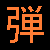
<style>
.page{position:relative;width:50px;height:50px;background:#000000}
.page>*{position:absolute;margin:0}
.t1{font:42.3px "MS-PGothic";color:#ff7c34}
</style>
<div class="page">
<p class="t1" style="left:7px;top:6px;width:37px;height:37px">弾</p>
</div>
